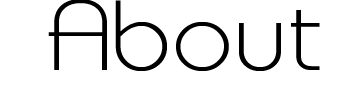
<style>
.page{position:relative;width:364px;height:97px;background:#ffffff}
.page>*{position:absolute;margin:0}
.t1{font:100px "MonaKo";color:#000000;scale:1.1 1}
</style>
<div class="page">
<p class="t1" style="left:48px;top:0px;width:272px;height:71px">About</p>
</div>
